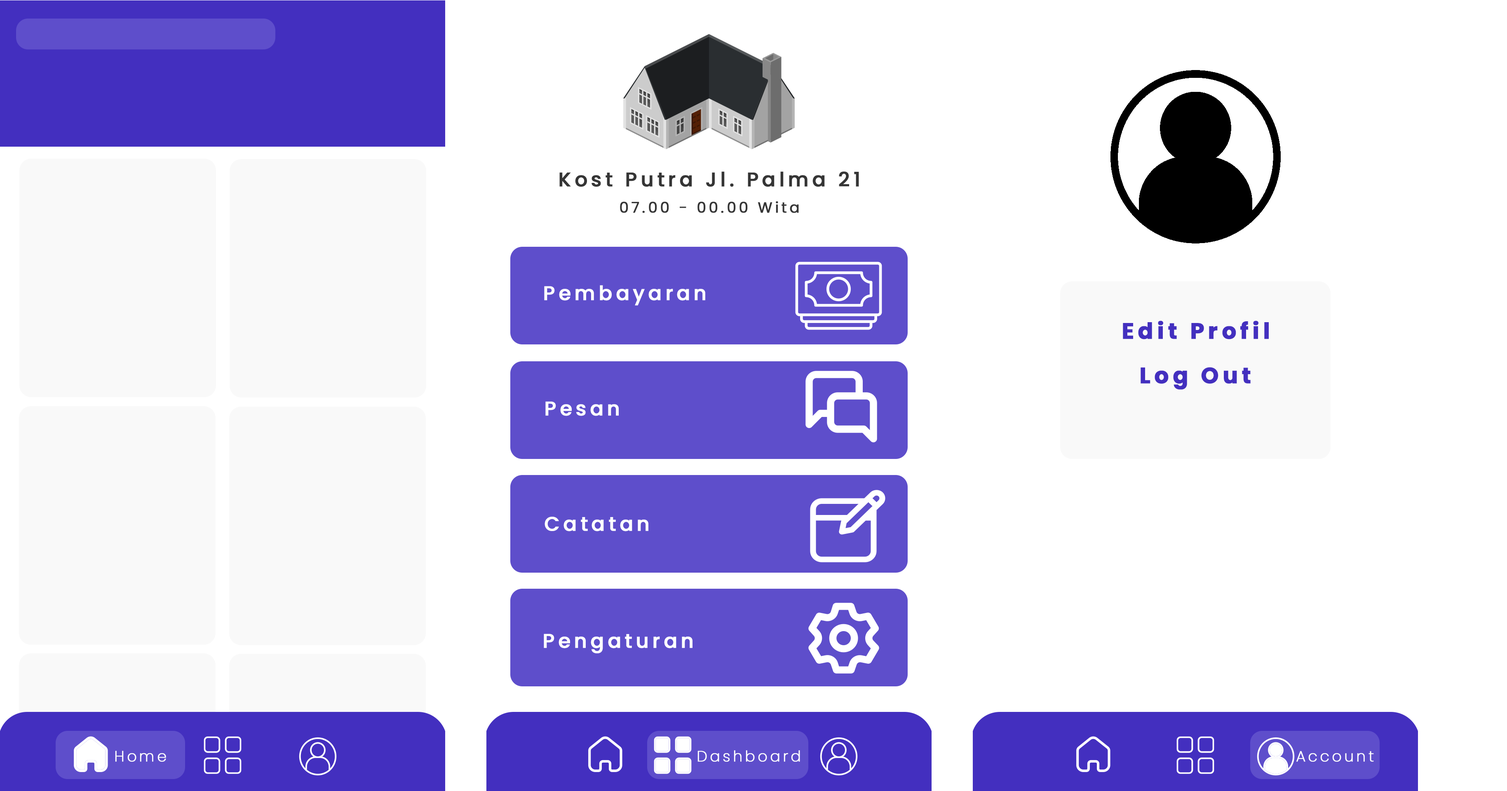
<style>
.page{position:relative;width:1507px;height:791px;background:#ffffff}
.page>*{position:absolute;margin:0}
.t1{font:19.8px "Poppins-Medium";letter-spacing:0.16em;color:#353535;font-weight:bold}
.t2{font:14.8px "Poppins-Regular";letter-spacing:0.16em;color:#353535;font-weight:bold}
.t3{font:19.8px "Poppins-Medium";letter-spacing:0.16em;color:#ffffff;font-weight:bold}
.t4{font:22.3px "Poppins-Bold";letter-spacing:0.16em;color:#432fbf;font-weight:bold}
.t5{font:14.8px "Poppins-ExtraLight";letter-spacing:0.16em;color:#ffffff;font-weight:bold}
</style>
<div class="page">
<p class="t1" style="left:559px;top:171px;width:300px;height:16px">Kost Putra Jl. Palma 21</p>
<p class="t2" style="left:620px;top:201px;width:179px;height:12px">07.00 - 00.00 Wita</p>
<p class="t3" style="left:544px;top:285px;width:161px;height:21px">Pembayaran</p>
<p class="t4" style="left:1123px;top:321px;width:146px;height:19px">Edit Profil</p>
<p class="t4" style="left:1140px;top:367px;width:110px;height:23px">Log Out</p>
<p class="t3" style="left:545px;top:401px;width:74px;height:15px">Pesan</p>
<p class="t3" style="left:544px;top:517px;width:104px;height:15px">Catatan</p>
<p class="t3" style="left:544px;top:634px;width:148px;height:20px">Pengaturan</p>
<p class="t5" style="left:115px;top:751px;width:51px;height:11px">Home</p>
<p class="t5" style="left:697px;top:751px;width:103px;height:11px">Dashboard</p>
<p class="t5" style="left:1296px;top:751px;width:78px;height:11px">Account</p>
</div>
